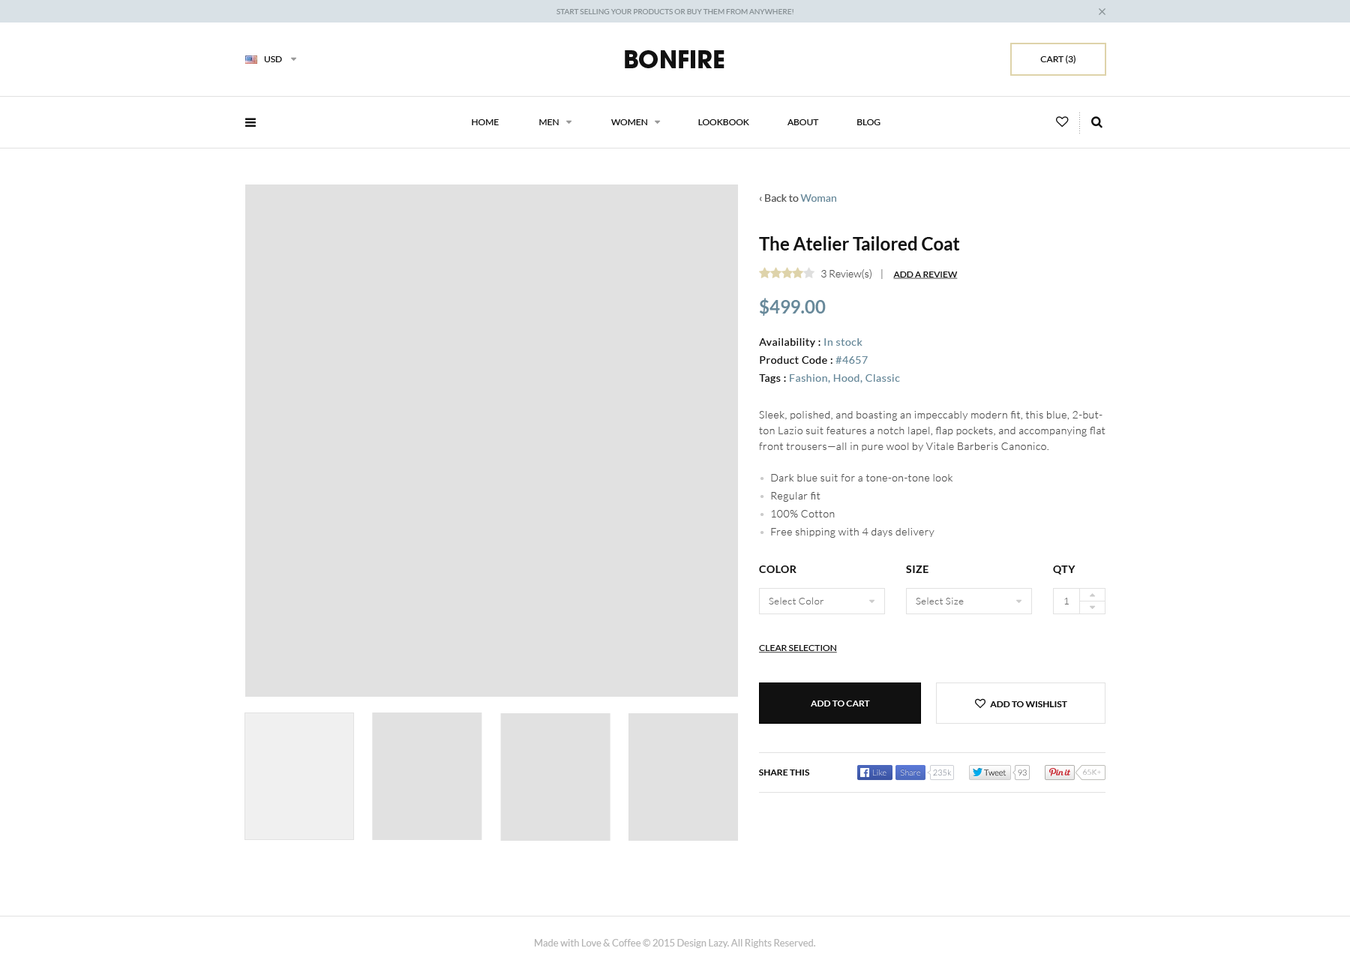
<style>
.page{position:relative;width:1350px;height:969px;background:#ffffff}
.page>*{position:absolute;margin:0}
.t1{font:7.5px "Lato-Regular";color:#868f93;text-transform:uppercase}
.t2{font:9px "Lato-Regular";color:#111111;text-transform:uppercase}
.t3{font:10.5px/18px "Lato-Regular";letter-spacing:0.04em;color:#68899a}
.t4{font:10.5px/18px "Lato-Regular";letter-spacing:0.04em;color:#111111}
.t5{font:10.5px/15.8px "Lato-Light";letter-spacing:0.04em;color:#555555}
.t6{font:10.5px/27px "Lato-Light";letter-spacing:0.04em;color:#555555}
.t7{font:10.5px/15.8px "Lato-Light";letter-spacing:0.04em;color:#cccccc}
.t8{font:10.5px/18px "Lato-Light";letter-spacing:0.04em;color:#cccccc}
.t9{font:10.5px/18px "Lato-Light";letter-spacing:0.04em;color:#555555}
.t10{font:10.5px "Lato-Bold";letter-spacing:0.04em;color:#111111;text-transform:uppercase}
.t11{font:9.8px "Lato-Light";letter-spacing:0.04em;color:#707070}
.t12{font:9px "Lato-Regular";color:#111111;text-transform:uppercase;text-decoration:underline}
.t13{font:9px "Lato-Bold";color:#ffffff;text-transform:uppercase}
.t14{font:9px "Lato-Bold";color:#111111;text-transform:uppercase}
.t15{font:8.3px "Lato-Light"}
.t16{font:7.5px "Lato-Light"}
.t17{font:9.8px "Lato-Regular";color:#b5b5b5}
</style>
<div class="page">
<p class="t1" style="left:556px;top:9px;width:238px;height:5px">start selling your products or buy them from anywhere!</p>
<p class="t2" style="left:1040px;top:55px;width:36px;height:9px">Cart (3)</p>
<p class="t3" style="left:759px;top:338px;width:141px;height:45px"><span class="t4">Availability :</span> In stock<br><span class="t4">Product Code : </span>#4657<br><span class="t4">Tags : </span>Fashion, Hood, Classic</p>
<p class="t5" style="left:759px;top:411px;width:347px;height:127px"><span class="t6">Sleek, polished, and boasting an impeccably modern fit, this blue, 2-but-<br></span>ton Lazio suit features a notch lapel, flap pockets, and accompanying flat<br>front trousers—all in pure wool by Vitale Barberis Canonico.<br><br><span class="t7">•  </span>Dark blue suit for a tone-on-tone look<br><span class="t8">•  </span><span class="t9">Regular fit<br></span><span class="t8">•  </span><span class="t9">100% Cotton<br></span><span class="t8">•  </span><span class="t9">Free shipping with 4 days delivery</span></p>
<p class="t10" style="left:759px;top:566px;width:37px;height:7px">color</p>
<p class="t10" style="left:906px;top:566px;width:22px;height:7px">size</p>
<p class="t10" style="left:1053px;top:566px;width:23px;height:8px">QTY</p>
<p class="t11" style="left:769px;top:597px;width:55px;height:7px">Select Color</p>
<p class="t11" style="left:916px;top:597px;width:48px;height:7px">Select Size</p>
<p class="t11" style="left:1064px;top:598px;width:5px;height:6px">1</p>
<p class="t12" style="left:759px;top:645px;width:78px;height:8px">Clear Selection</p>
<p class="t13" style="left:811px;top:700px;width:59px;height:6px">add to cart</p>
<p class="t14" style="left:759px;top:770px;width:51px;height:6px">share this</p>
<p class="t15" style="left:873px;top:770px;width:13px;height:6px">Like</p>
<p class="t15" style="left:901px;top:770px;width:19px;height:6px">Share</p>
<p class="t15" style="left:933px;top:770px;width:19px;height:6px">235k</p>
<p class="t15" style="left:984px;top:770px;width:22px;height:6px">Tweet</p>
<p class="t15" style="left:1018px;top:770px;width:9px;height:6px">93</p>
<p class="t16" style="left:1083px;top:769px;width:18px;height:6px">65K+</p>
<p class="t17" style="left:535px;top:939px;width:280px;height:9px">Made with Love &amp; Coffee © 2015 Design Lazy. All Rights Reserved.</p>
</div>
